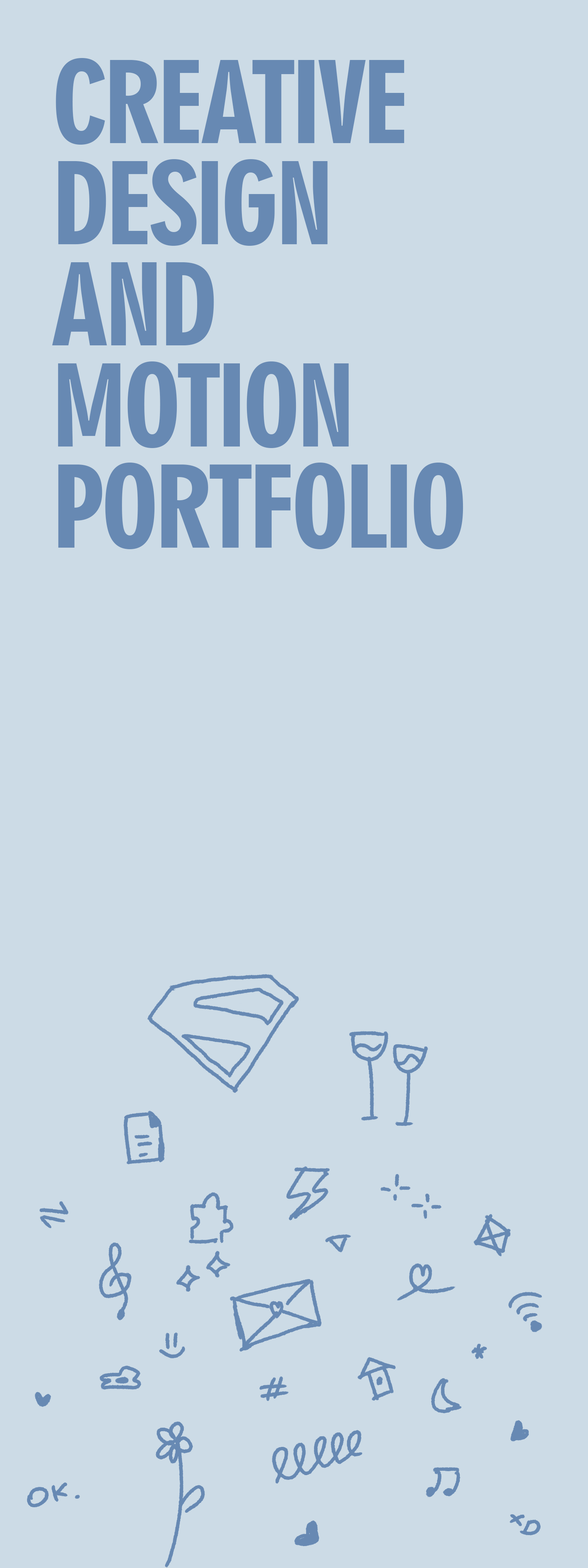
<style>
.page{position:relative;width:588px;height:1568px;background:#ccdbe6}
.page>*{position:absolute;margin:0}
.t1{font:109px/101.1px "Geometric706BT-BlackCondensedB";letter-spacing:-0.04em;color:#6789b3}
</style>
<div class="page">
<p class="t1" style="left:52px;top:58px;width:411px;height:491px">CREATIVE<br>DESIGN<br>AND<br>MOTION<br>PORTFOLIO</p>
</div>
